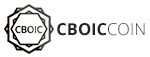
<style>
.page{position:relative;width:150px;height:57px;background:#ffffff}
.page>*{position:absolute;margin:0}
.t1{font:16.5px "OpenSans-Bold";color:#212121;text-transform:uppercase}
.t2{font:16.5px "OpenSans-Light";color:#212121;text-transform:uppercase}
</style>
<div class="page">
<p class="t1" style="left:57px;top:23px;width:88px;height:13px">CBOIC<span class="t2">coin</span></p>
</div>
